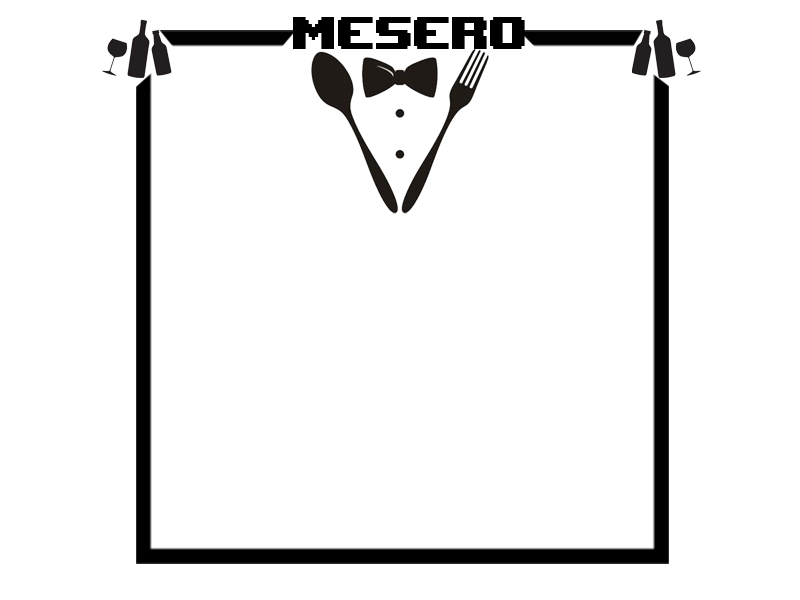
<style>
.page{position:relative;width:800px;height:600px;background:#ffffff}
.page>*{position:absolute;margin:0}
.t1{font:63.4px "UpheavalTT-BRK-";color:#000000}
</style>
<div class="page">
<p class="t1" style="left:293px;top:17px;width:232px;height:32px">mesero</p>
</div>
